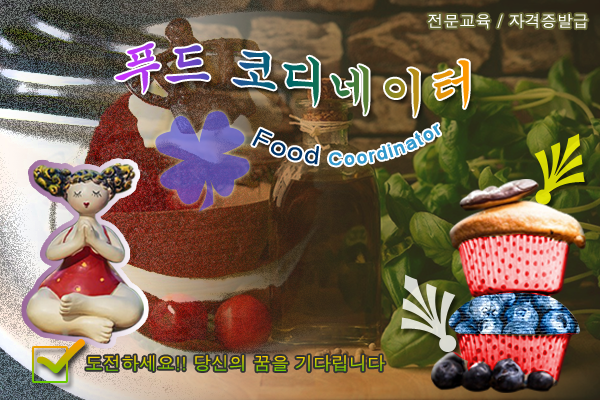
<style>
.page{position:relative;width:600px;height:400px}
.page>*{position:absolute;margin:0}
.t1{font:16px "Dotum";color:#ffffff}
.t2{font:18px "ArialMT";letter-spacing:0.05em;color:#3399cc}
.t3{font:25px "ArialMT";letter-spacing:0.05em;color:#003366}
.t4{font:18px "Dotum"}
</style>
<div class="page">
<p class="t1" style="left:428px;top:14px;width:160px;height:15px">전문교육 / 자격증발급</p>
<p class="t2" style="left:252px;top:124px;width:189px;height:42px;rotate:-4deg"><span class="t3">Food </span>Coordinator</p>
<p class="t4" style="left:86px;top:355px;width:299px;height:17px">도전하세요!! 당신의 꿈을 기다립니다</p>
</div>
